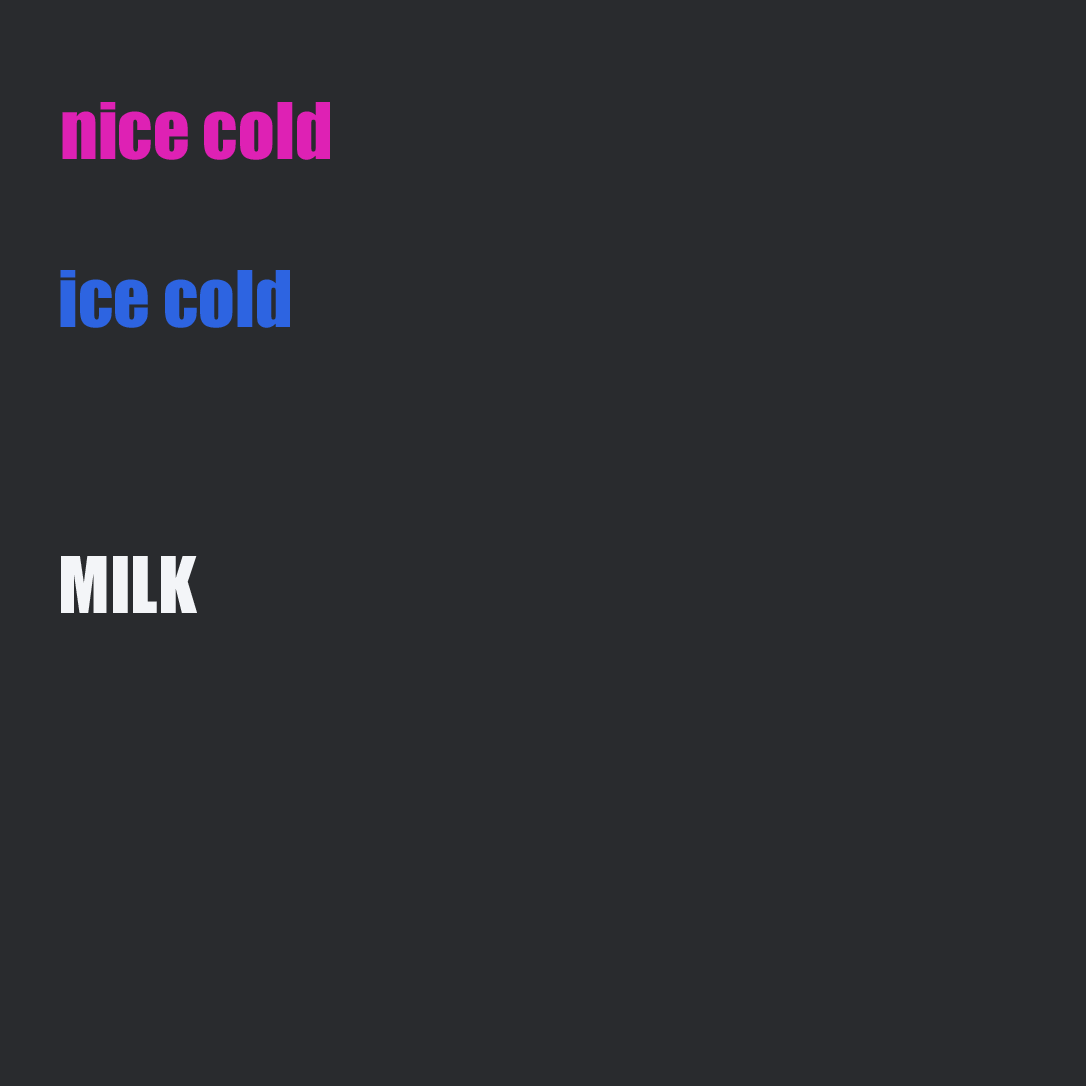
<style>
.page{position:relative;width:1086px;height:1086px;background:#292b2e}
.page>*{position:absolute;margin:0}
.t1{font:72px "Impact";color:#de21b4}
.t2{font:72px "Impact";color:#2d64e1}
.t3{font:72px "Impact";color:#f3f5f8}
</style>
<div class="page">
<p class="t1" style="left:62px;top:102px;width:268px;height:58px">nice cold</p>
<p class="t2" style="left:60px;top:270px;width:230px;height:58px">ice cold</p>
<p class="t3" style="left:61px;top:556px;width:136px;height:57px">MILK</p>
</div>
